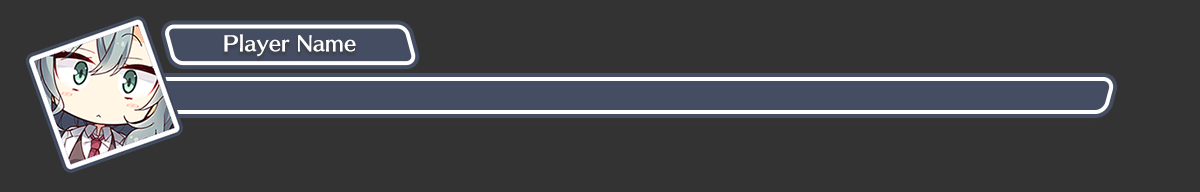
<style>
.page{position:relative;width:1200px;height:192px;background:#333333}
.page>*{position:absolute;margin:0}
.t1{font:19.6px "SkipStd-B";color:#ffffff}
</style>
<div class="page">
<p class="t1" style="left:224px;top:34px;width:132px;height:23px">Player Name</p>
</div>
